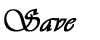
<style>
.page{position:relative;width:100px;height:40px;background:#ffffff}
.page>*{position:absolute;margin:0}
.t1{font:32px "Vivaldii";color:#000000;font-weight:bold}
</style>
<div class="page">
<p class="t1" style="left:4px;top:8px;width:73px;height:24px">Save</p>
</div>
